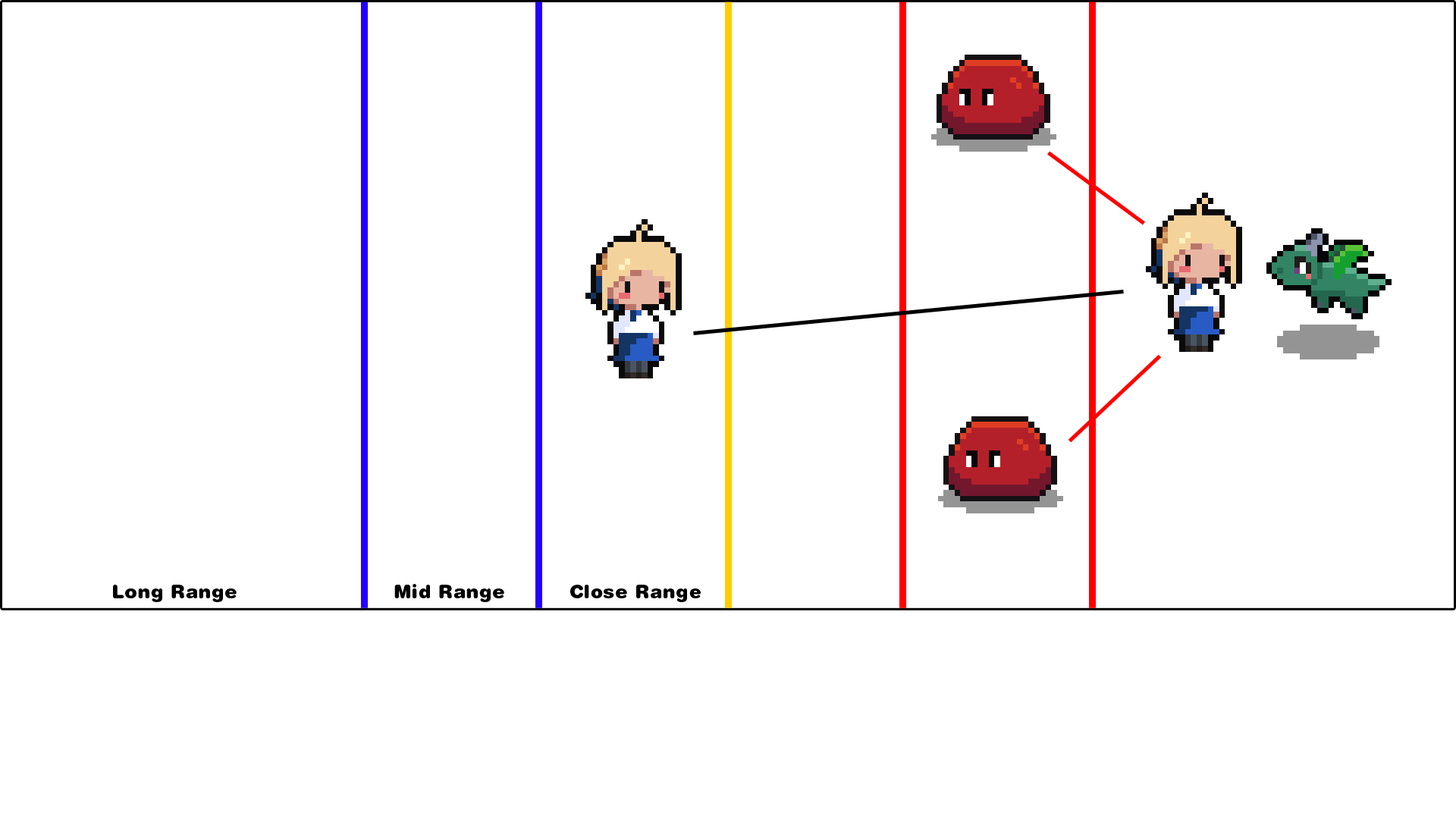
<style>
.page{position:relative;width:1456px;height:819px;background:#ffffff}
.page>*{position:absolute;margin:0}
.t1{font:19px "HelveticaRoundedLTStd-Black";letter-spacing:0.02em;color:#000000}
</style>
<div class="page">
<p class="t1" style="left:113px;top:585px;width:124px;height:17px">Long Range</p>
<p class="t1" style="left:394px;top:584px;width:110px;height:18px">Mid Range</p>
<p class="t1" style="left:570px;top:585px;width:131px;height:17px">Close Range</p>
</div>
